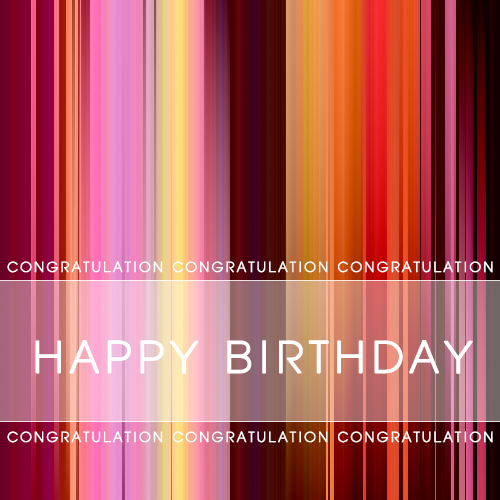
<style>
.page{position:relative;width:500px;height:500px}
.page>*{position:absolute;margin:0}
.t1{font:16px "HYnamL";letter-spacing:0.08em;color:#ffffff;font-weight:bold}
.t2{font:50px "HYnamL";letter-spacing:0.05em;color:#ffffff;font-weight:bold}
</style>
<div class="page">
<p class="t1" style="left:7px;top:261px;width:486px;height:12px">CONGRATULATION CONGRATULATION CONGRATULATION</p>
<p class="t2" style="left:35px;top:340px;width:438px;height:34px">HAPPY BIRTHDAY</p>
<p class="t1" style="left:7px;top:431px;width:486px;height:12px">CONGRATULATION CONGRATULATION CONGRATULATION</p>
</div>
